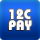
<style>
.page{position:relative;width:40px;height:40px}
.page>*{position:absolute;margin:0}
.t1{font:13.3px/11.1px "BauhausStd-Bold";color:#ffffff;font-weight:bold}
</style>
<div class="page">
<p class="t1" style="left:9px;top:9px;width:23px;height:21px">12C<br>PAY</p>
</div>
